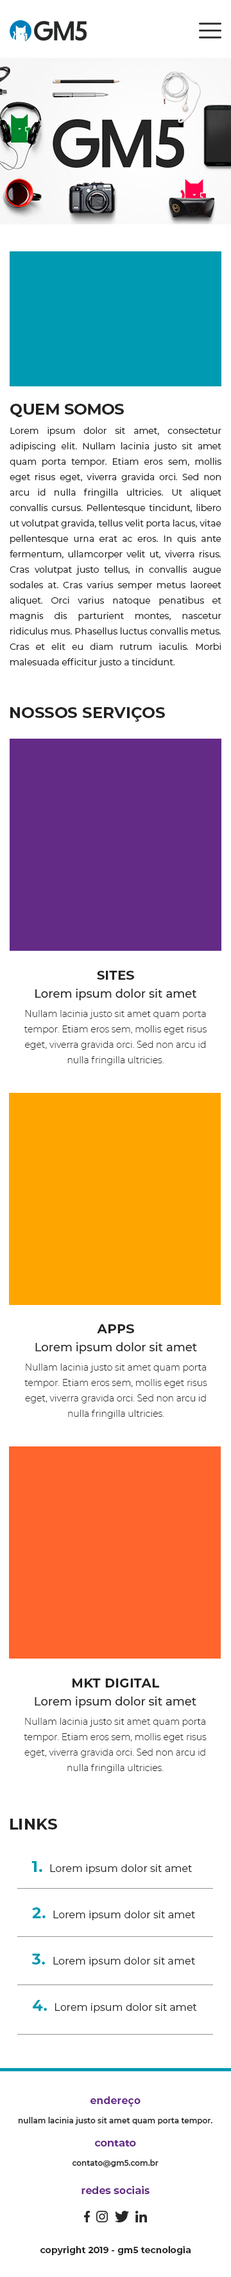
<style>
.page{position:relative;width:231px;height:2277px;background:#ffffff}
.page>*{position:absolute;margin:0}
.t1{font:9px/15.4px "Montserrat-Regular";color:#232323}
.t2{font:15.4px "Montserrat-Bold";color:#232323}
.t3{font:9px/19.3px "Montserrat-Regular";color:#232323}
.t4{font:15.4px "Montserrat-Bold";letter-spacing:0.01em;color:#232323}
.t5{font:9px/15.4px "Montserrat-Light";color:#232323}
.t6{font:12.9px "Montserrat-Bold";letter-spacing:0.01em;color:#232323;text-transform:uppercase}
.t7{font:11.6px/18px "Montserrat-Medium";color:#232323}
.t8{font:9px/19.3px "Montserrat-Light";color:#232323}
.t9{font:10.3px/46.3px "Montserrat-Regular";color:#232323}
.t10{font:15.4px/46.3px "Montserrat-Bold";letter-spacing:0.01em;color:#009ab2}
.t11{font:7.7px/19.3px "Montserrat-SemiBold";color:#232323}
.t12{font:10.3px/23.1px "Montserrat-Bold";color:#642b86}
.t13{font:10.3px "Montserrat-Bold";color:#642b86}
.t14{font:9px "Montserrat-Bold";color:#232323}
</style>
<div class="page">
<p class="t1" style="left:10px;top:404px;width:212px;height:263px"><span class="t2">QUEM SOMOS<br></span><span class="t3">Lorem</span> ipsum dolor sit amet, consectetur adipiscing elit. Nullam lacinia justo sit amet quam porta tempor. Etiam eros sem, mollis eget risus eget, viverra gravida orci. Sed non arcu id nulla fringilla ultricies. Ut aliquet convallis cursus. Pellentesque tincidunt, libero ut volutpat gravida, tellus velit porta lacus, vitae pellentesque urna erat ac eros. In quis ante fermentum, ullamcorper velit ut, viverra risus. Cras volutpat justo tellus, in convallis augue sodales at. Cras varius semper metus laoreet aliquet. Orci varius natoque penatibus et magnis dis parturient montes, nascetur ridiculus mus. Phasellus luctus convallis metus. Cras et elit eu diam rutrum iaculis. Morbi malesuada efficitur justo a tincidunt.</p>
<p class="t4" style="left:10px;top:707px;width:155px;height:15px">NOSSOS SERVIÇOS</p>
<p class="t5" style="left:24px;top:971px;width:183px;height:94px;text-align:center"><span class="t6">Sites<br></span><span class="t7">Lorem ipsum dolor sit amet<br></span><span class="t8">Nullam lacinia</span> justo sit amet quam porta tempor. Etiam eros sem, mollis eget risus eget, viverra gravida orci. Sed non arcu id nulla fringilla ultricies.</p>
<p class="t5" style="left:24px;top:1324px;width:184px;height:95px;text-align:center"><span class="t6">APPS<br></span><span class="t7">Lorem ipsum dolor sit amet<br></span><span class="t8">Nullam lacinia</span> justo sit amet quam porta tempor. Etiam eros sem, mollis eget risus eget, viverra gravida orci. Sed non arcu id nulla fringilla ultricies.</p>
<p class="t5" style="left:24px;top:1679px;width:183px;height:94px;text-align:center"><span class="t6">MKT DIGITAL<br></span><span class="t7">Lorem ipsum dolor sit amet<br></span><span class="t8">Nullam lacinia</span> justo sit amet quam porta tempor. Etiam eros sem, mollis eget risus eget, viverra gravida orci. Sed non arcu id nulla fringilla ultricies.</p>
<p class="t4" style="left:10px;top:1819px;width:47px;height:11px">LINKS</p>
<p class="t9" style="left:32px;top:1861px;width:165px;height:152px"><span class="t10">1. </span>Lorem ipsum dolor sit amet <br><span class="t10">2. </span>Lorem ipsum dolor sit amet<br><span class="t10">3. </span>Lorem ipsum dolor sit amet <br><span class="t10">4. </span>Lorem ipsum dolor sit amet</p>
<p class="t11" style="left:18px;top:2096px;width:195px;height:72px;text-align:center"><span class="t12">endereço<br></span>nullam lacinia justo sit amet quam porta tempor.<br><span class="t12">contato<br></span>contato@gm5.com.br</p>
<p class="t13" style="left:82px;top:2186px;width:68px;height:8px">redes sociais</p>
<p class="t14" style="left:40px;top:2246px;width:151px;height:9px">copyright 2019 - gm5 tecnologia</p>
</div>
